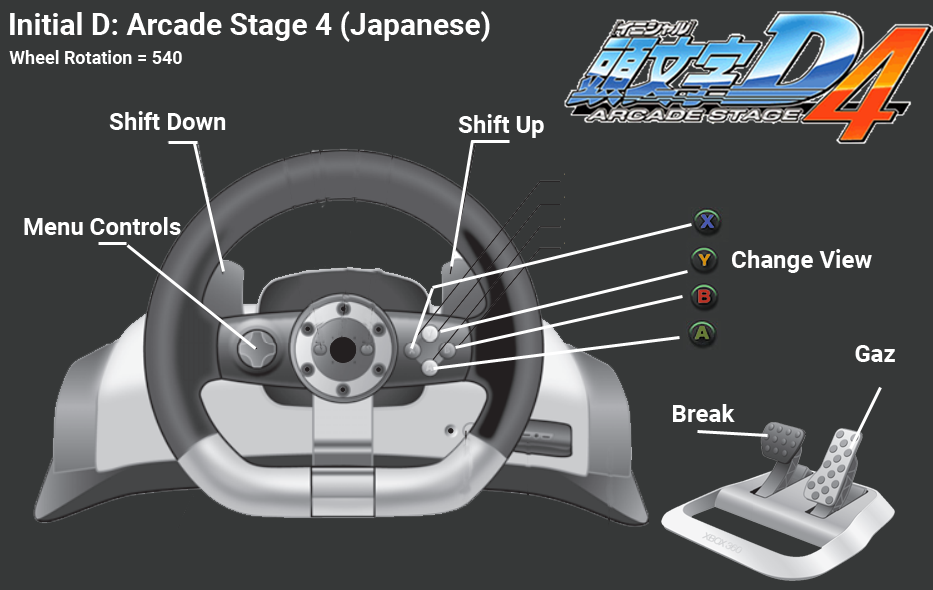
<style>
.page{position:relative;width:933px;height:590px;background:#363838}
.page>*{position:absolute;margin:0}
.t1{font:30px "Roboto-Bold";color:#ffffff}
.t2{font:18px "Roboto-Bold";color:#ffffff}
.t3{font:24px "Roboto-Bold";color:#ffffff}
</style>
<div class="page">
<p class="t1" style="left:10px;top:11px;width:480px;height:31px">Initial D: Arcade Stage 4 (Japanese)</p>
<p class="t2" style="left:9px;top:50px;width:173px;height:14px">Wheel Rotation = 540</p>
<p class="t3" style="left:109px;top:111px;width:117px;height:19px">Shift Down</p>
<p class="t3" style="left:458px;top:114px;width:86px;height:24px">Shift Up</p>
<p class="t3" style="left:24px;top:217px;width:157px;height:18px">Menu Controls</p>
<p class="t3" style="left:732px;top:249px;width:140px;height:24px">Change View</p>
<p class="t3" style="left:855px;top:345px;width:40px;height:17px">Gaz</p>
<p class="t3" style="left:673px;top:404px;width:62px;height:18px">Break</p>
</div>
